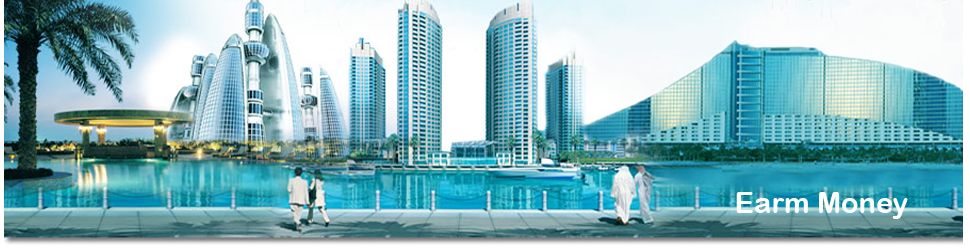
<style>
.page{position:relative;width:970px;height:250px}
.page>*{position:absolute;margin:0}
.t1{font:29px "ArialRoundedMTBold";color:#ffffff}
</style>
<div class="page">
<p class="t1" style="left:736px;top:192px;width:172px;height:27px">Earm Money</p>
</div>
